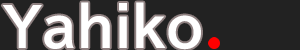
<style>
.page{position:relative;width:300px;height:50px;background:#222222}
.page>*{position:absolute;margin:0}
.t1{font:53px "BIZ-UDPGothic-Bold";color:#ffffff}
</style>
<div class="page">
<p class="t1" style="left:2px;top:2px;width:199px;height:48px">Yahiko</p>
</div>
